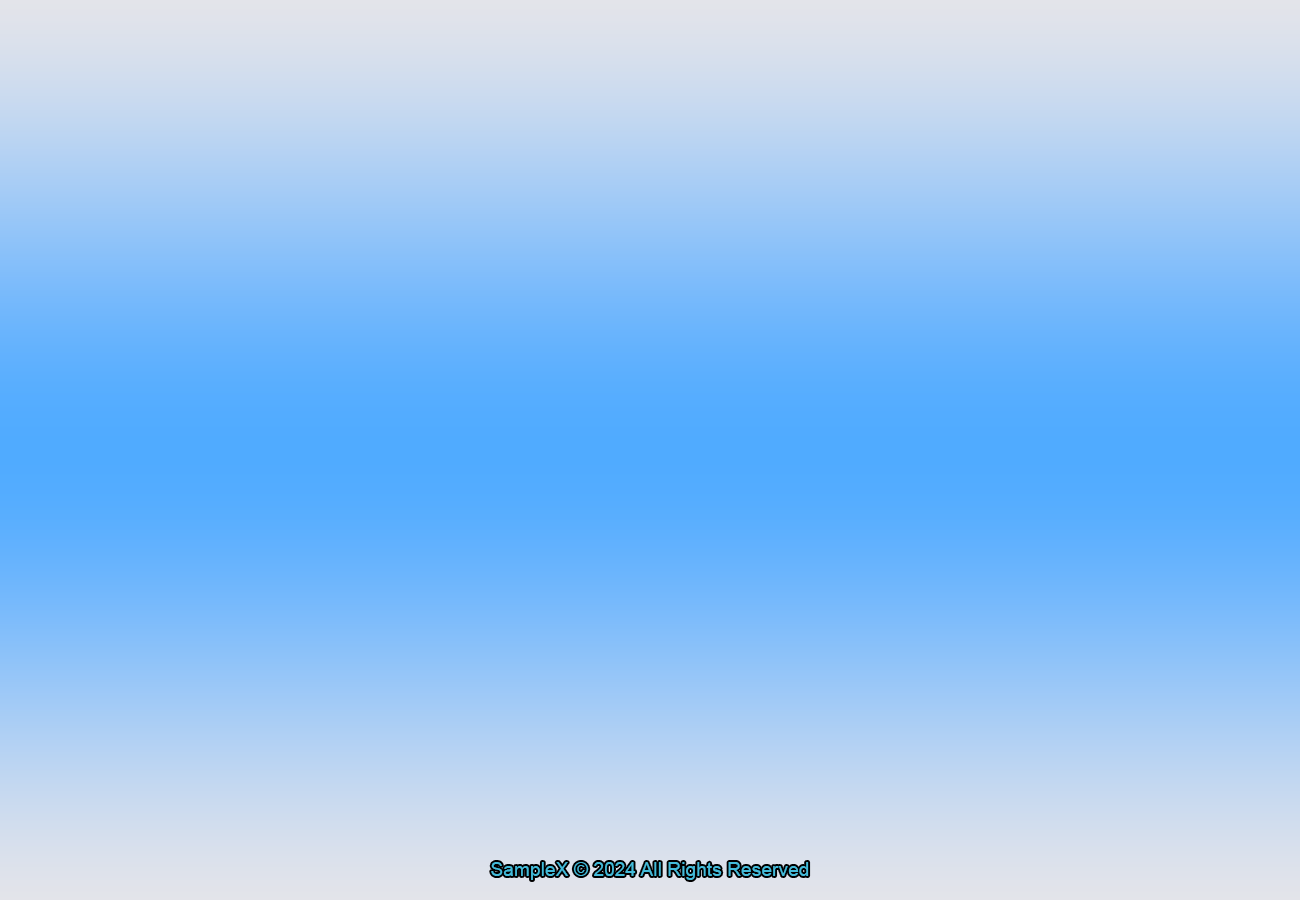
<style>
.page{position:relative;width:1300px;height:900px}
.page>*{position:absolute;margin:0}
.t1{font:19.2px "ArialMT";color:#44bbd9}
</style>
<div class="page">
<p class="t1" style="left:491px;top:862px;width:318px;height:18px">SampleX ©️ 2024 All Rights Reserved</p>
</div>
